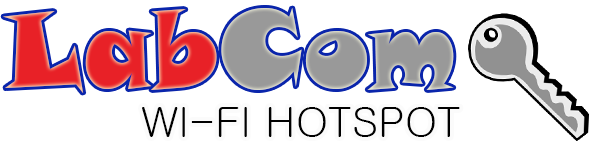
<style>
.page{position:relative;width:600px;height:150px;background:#ffffff}
.page>*{position:absolute;margin:0}
.t1{font:108.7px "SnapITC-Regular";color:#e82127}
.t2{font:108.7px "SnapITC-Regular";color:#999999}
</style>
<div class="page">
<p class="t1" style="left:3px;top:8px;width:451px;height:85px">Lab<span class="t2">Com</span></p>
</div>
